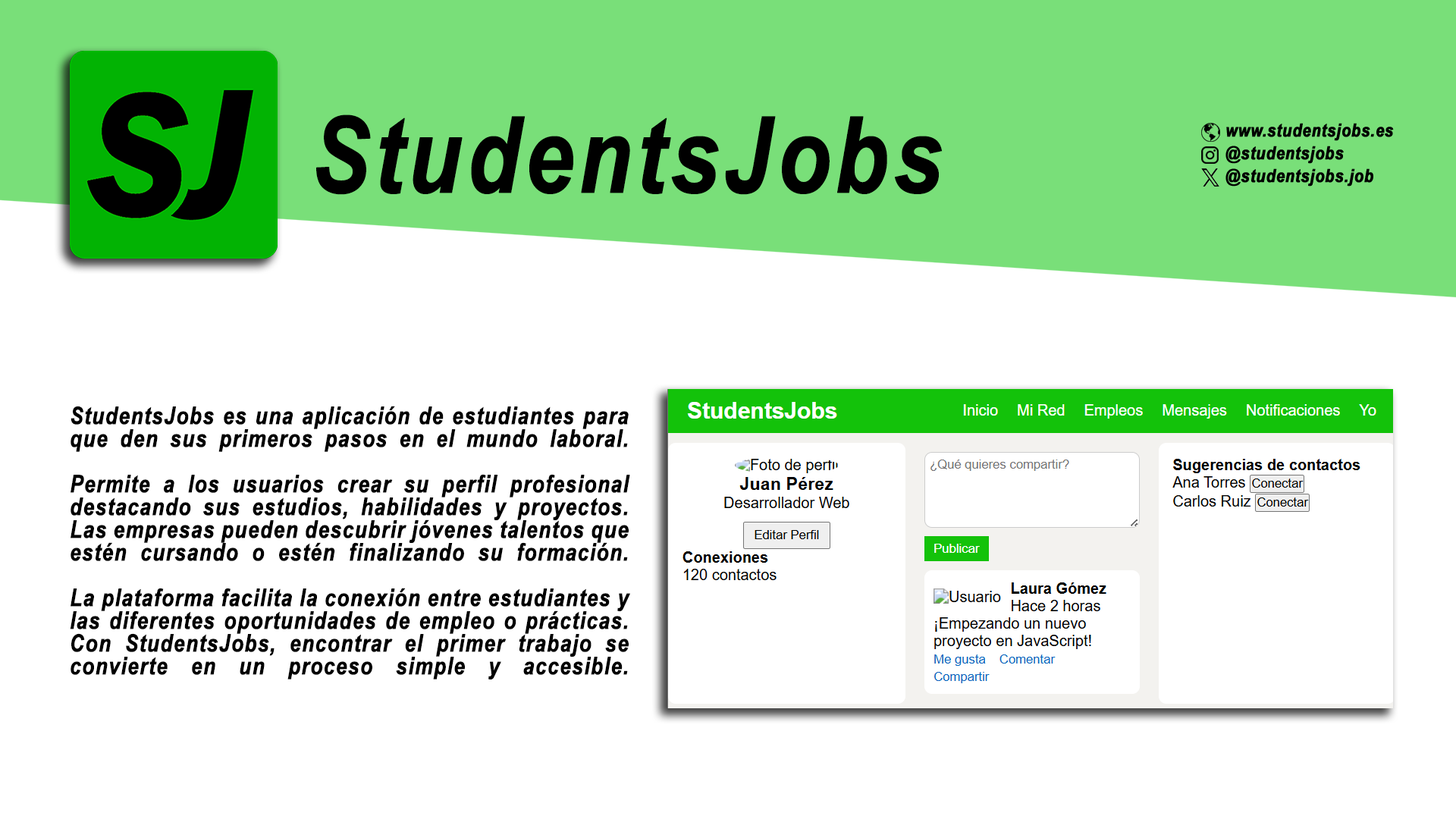
<style>
.page{position:relative;width:1456px;height:819px;background:#ffffff}
.page>*{position:absolute;margin:0}
.t1{font:106.2px "ArialNarrow-BoldItalic";letter-spacing:0.02em;color:#000000;font-weight:bold}
.t2{font:24.3px/22.7px "ArialNarrow-BoldItalic";letter-spacing:0.02em;color:#000000;font-weight:bold}
</style>
<div class="page">
<p class="t1" style="left:316px;top:115px;width:627px;height:80px">StudentsJobs</p>
<p class="t2" style="left:70px;top:406px;width:560px;height:273px;text-align:justify">StudentsJobs es una aplicación de estudiantes para que den sus primeros pasos en el mundo laboral.<br><br>Permite a los usuarios crear su perfil profesional destacando sus estudios, habilidades y proyectos.<br>Las empresas pueden descubrir jóvenes talentos que estén cursando o estén finalizando su formación.<br><br>La plataforma facilita la conexión entre estudiantes y las diferentes oportunidades de empleo o prácticas.<br>Con StudentsJobs, encontrar el primer trabajo se convierte en un proceso simple y accesible.</p>
</div>
